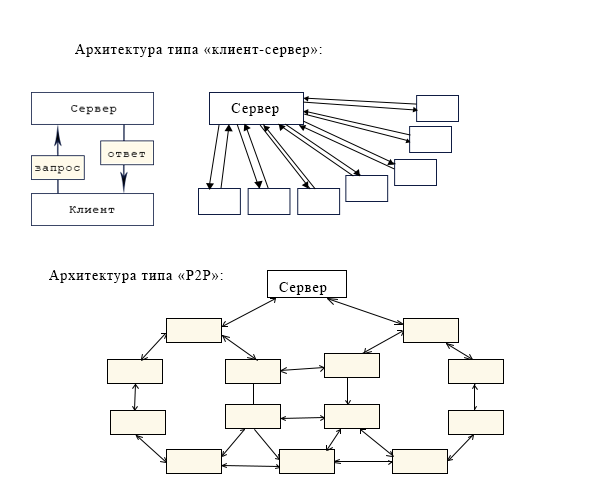
<style>
.page{position:relative;width:600px;height:500px;background:#ffffff}
.page>*{position:absolute;margin:0}
.t1{font:14px "TimesNewRomanPSMT";letter-spacing:0.075em;color:#000000}
</style>
<div class="page">
<p class="t1" style="left:75px;top:44px;width:247px;height:13px">Архитектура типа «клиент-сервер»:</p>
<p class="t1" style="left:49px;top:270px;width:174px;height:13px">Архитектура типа «P2P»:</p>
<p class="t1" style="left:279px;top:282px;width:48px;height:13px">Сервер</p>
</div>
